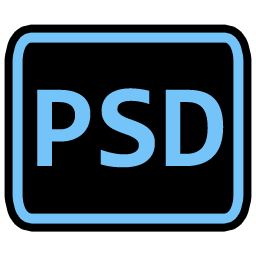
<style>
.page{position:relative;width:256px;height:256px;background:#000000}
.page>*{position:absolute;margin:0}
.t1{font:119.2px "Consolas-Bold";color:#74c4fa}
</style>
<div class="page">
<p class="t1" style="left:37px;top:88px;width:187px;height:80px">PSD</p>
</div>
